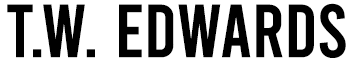
<style>
.page{position:relative;width:354px;height:63px;background:#ffffff}
.page>*{position:absolute;margin:0}
.t1{font:75px "Bebas-Regular";color:#000000}
</style>
<div class="page">
<p class="t1" style="left:7px;top:3px;width:339px;height:55px">T.W. Edwards</p>
</div>
